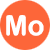
<style>
.page{position:relative;width:50px;height:50px;background:#fd6639}
.page>*{position:absolute;margin:0}
.t1{font:28px "ArialRoundedMTBold";color:#ffffff}
</style>
<div class="page">
<p class="t1" style="left:6px;top:15px;width:38px;height:21px">Mo</p>
</div>
